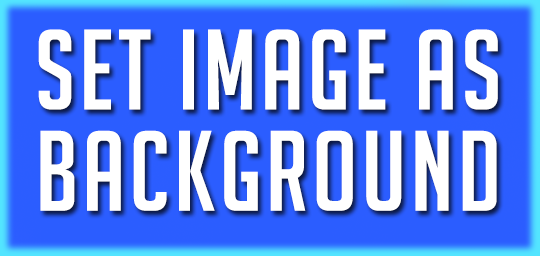
<style>
.page{position:relative;width:540px;height:256px;background:#2b5dff}
.page>*{position:absolute;margin:0}
.t1{font:111.1px/72.3px "BigNoodleTitling";letter-spacing:0.04em;color:#ffffff;text-transform:uppercase}
</style>
<div class="page">
<p class="t1" style="left:38px;top:29px;width:460px;height:182px;text-align:center">set image as<br>background</p>
</div>
